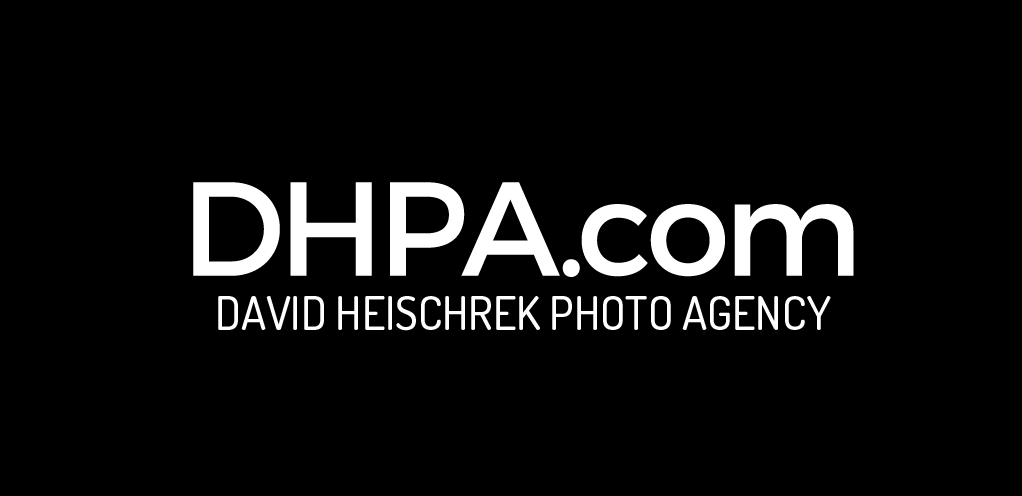
<style>
.page{position:relative;width:1022px;height:496px;background:#000000}
.page>*{position:absolute;margin:0}
.t1{font:133.3px "Montserrat-Regular";letter-spacing:-0.045em;color:#ffffff}
.t2{font:133.3px "Montserrat-Regular";letter-spacing:-0.025em;color:#ffffff}
.t3{font:133.3px "Montserrat-Regular";letter-spacing:-0.065em;color:#ffffff}
.t4{font:45.8px "Dosis-Medium";letter-spacing:-0.005em;color:#ffffff}
.t5{font:50px "Montserrat-Regular";letter-spacing:-0.065em;color:#ffffff}
</style>
<div class="page">
<p class="t1" style="left:193px;top:182px;width:661px;height:95px">DHP<span class="t2">A</span><span class="t3">.</span>com</p>
<p class="t4" style="left:218px;top:296px;width:613px;height:35px"><span class="t5"> </span>DAVID HEISCHREK PHOTO AGENCY</p>
</div>
